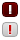
<style>
.page{position:relative;width:20px;height:40px;background:#ffffff}
.page>*{position:absolute;margin:0}
.t1{font:12.3px "Advantage-Demi";color:#ffffff;font-weight:bold;scale:1.13 1}
.t2{font:12.3px "Advantage-Demi";color:#c90604;font-weight:bold;scale:1.13 1}
</style>
<div class="page">
<p class="t1" style="left:9px;top:5px;width:3px;height:9px">!</p>
<p class="t2" style="left:9px;top:25px;width:3px;height:9px">!</p>
</div>
